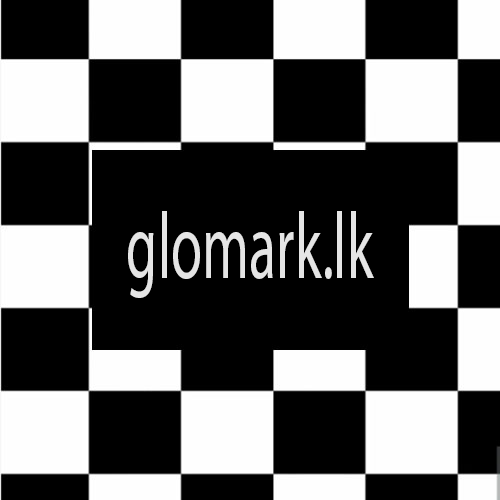
<style>
.page{position:relative;width:500px;height:500px;background:#000000}
.page>*{position:absolute;margin:0}
.t1{font:94px "MyriadPro-Regular";color:#e5e5e5;scale:0.6 1}
</style>
<div class="page">
<p class="t1" style="left:128px;top:211px;width:246px;height:87px">glomark.lk</p>
</div>
